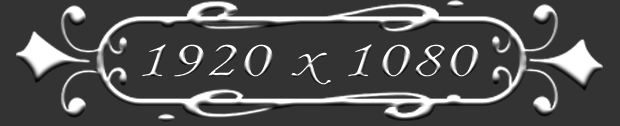
<style>
.page{position:relative;width:620px;height:126px;background:#333333}
.page>*{position:absolute;margin:0}
.t1{font:53.6px "MonotypeCorsiva";letter-spacing:0.04em;scale:1.32 1}
</style>
<div class="page">
<p class="t1" style="left:142px;top:44px;width:337px;height:41px">1920 x 1080</p>
</div>
